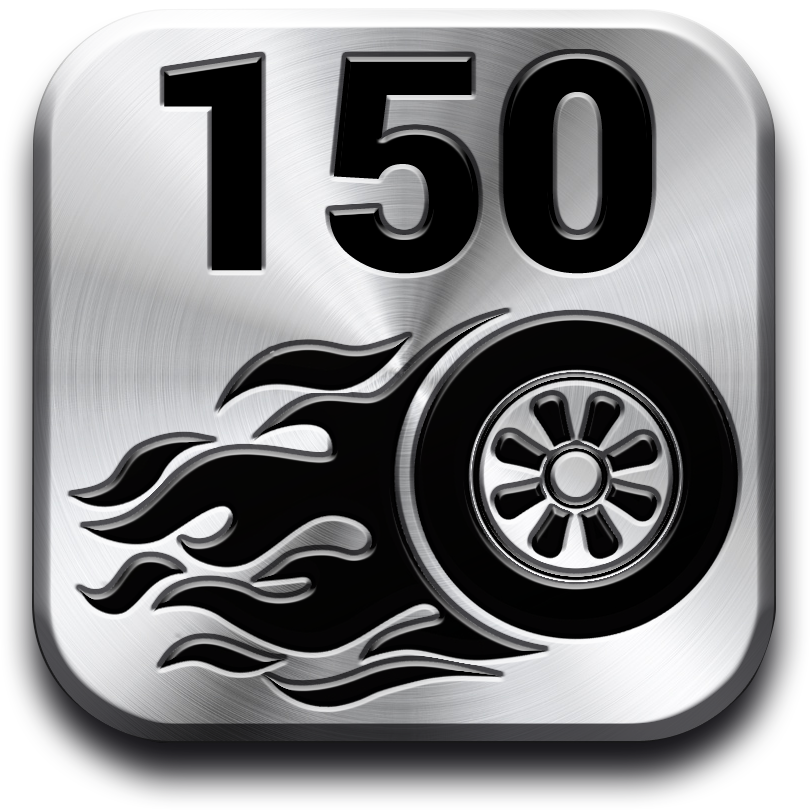
<style>
.page{position:relative;width:810px;height:810px}
.page>*{position:absolute;margin:0}
.t1{font:300px "Roboto-Black";color:#000000}
</style>
<div class="page">
<p class="t1" style="left:164px;top:53px;width:488px;height:221px">150</p>
</div>
